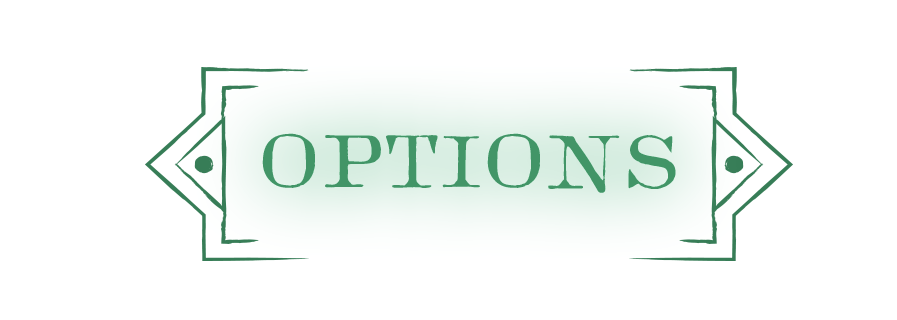
<style>
.page{position:relative;width:897px;height:320px;background:#ffffff}
.page>*{position:absolute;margin:0}
.t1{font:97px "CopperplateRomanHPLHS";letter-spacing:-0.06em;color:#429567}
</style>
<div class="page">
<p class="t1" style="left:262px;top:133px;width:414px;height:60px">OPTIONS</p>
</div>
